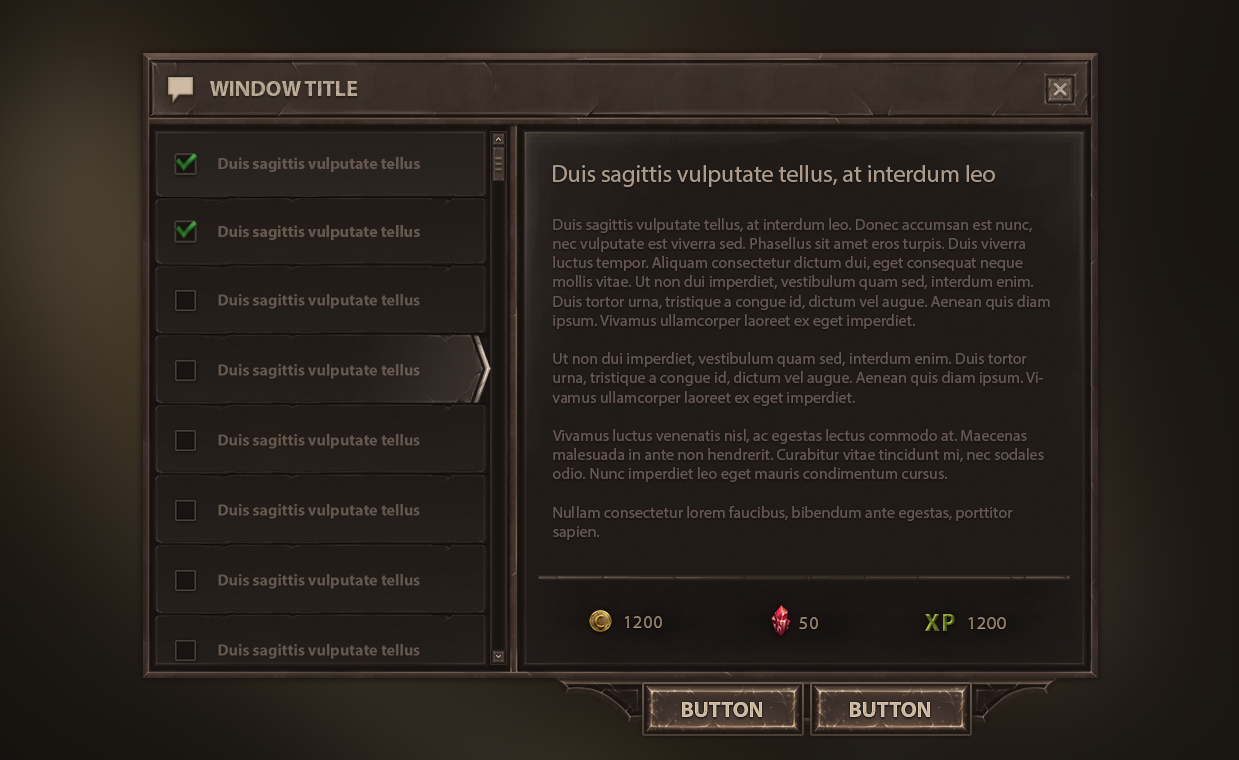
<style>
.page{position:relative;width:1239px;height:760px}
.page>*{position:absolute;margin:0}
.t1{font:22px "MyriadPro-Bold";color:#c1ae99;text-transform:uppercase}
.t2{font:16px "MyriadPro-Bold";color:#64574e}
.t3{font:24px "MyriadPro-Regular";color:#ac9b8a}
.t4{font:16px "MyriadPro-Regular";color:#655751}
.t5{font:18px "MyriadPro-Regular";letter-spacing:0.05em;color:#887663}
.t6{font:25px "MyriadPro-Bold";letter-spacing:0.05em}
.t7{font:22px "MyriadPro-Bold";color:#cab294;text-transform:uppercase}
</style>
<div class="page">
<p class="t1" style="left:210px;top:81px;width:147px;height:15px">Window Title</p>
<p class="t2" style="left:218px;top:157px;width:202px;height:15px">Duis sagittis vulputate tellus</p>
<p class="t3" style="left:553px;top:165px;width:442px;height:22px">Duis sagittis vulputate tellus, at interdum leo</p>
<p class="t4" style="left:552px;top:218px;width:498px;height:322px">Duis sagittis vulputate tellus, at interdum leo. Donec accumsan est nunc, nec vulputate est viverra sed. Phasellus sit amet eros turpis. Duis viverra luctus tempor. Aliquam consectetur dictum dui, eget consequat neque mollis vitae. Ut non dui imperdiet, vestibulum quam sed, interdum enim. Duis tortor urna, tristique a congue id, dictum vel augue. Aenean quis diam ipsum. Vivamus ullamcorper laoreet ex eget imperdiet.<br><br>Ut non dui imperdiet, vestibulum quam sed, interdum enim. Duis tortor urna, tristique a congue id, dictum vel augue. Aenean quis diam ipsum. Vivamus ullamcorper laoreet ex eget imperdiet.<br><br>Vivamus luctus venenatis nisl, ac egestas lectus commodo at. Maecenas malesuada in ante non hendrerit. Curabitur vitae tincidunt mi, nec sodales odio. Nunc imperdiet leo eget mauris condimentum cursus. <br><br>Nullam consectetur lorem faucibus, bibendum ante egestas, porttitor sapien.</p>
<p class="t2" style="left:218px;top:225px;width:202px;height:15px">Duis sagittis vulputate tellus</p>
<p class="t5" style="left:625px;top:616px;width:37px;height:12px">1200</p>
<p class="t5" style="left:799px;top:617px;width:19px;height:12px">50</p>
<p class="t6" style="left:925px;top:614px;width:30px;height:17px">XP</p>
<p class="t5" style="left:968px;top:617px;width:38px;height:12px">1200</p>
<p class="t7" style="left:682px;top:702px;width:80px;height:15px">button</p>
<p class="t7" style="left:850px;top:702px;width:80px;height:15px">button</p>
</div>
